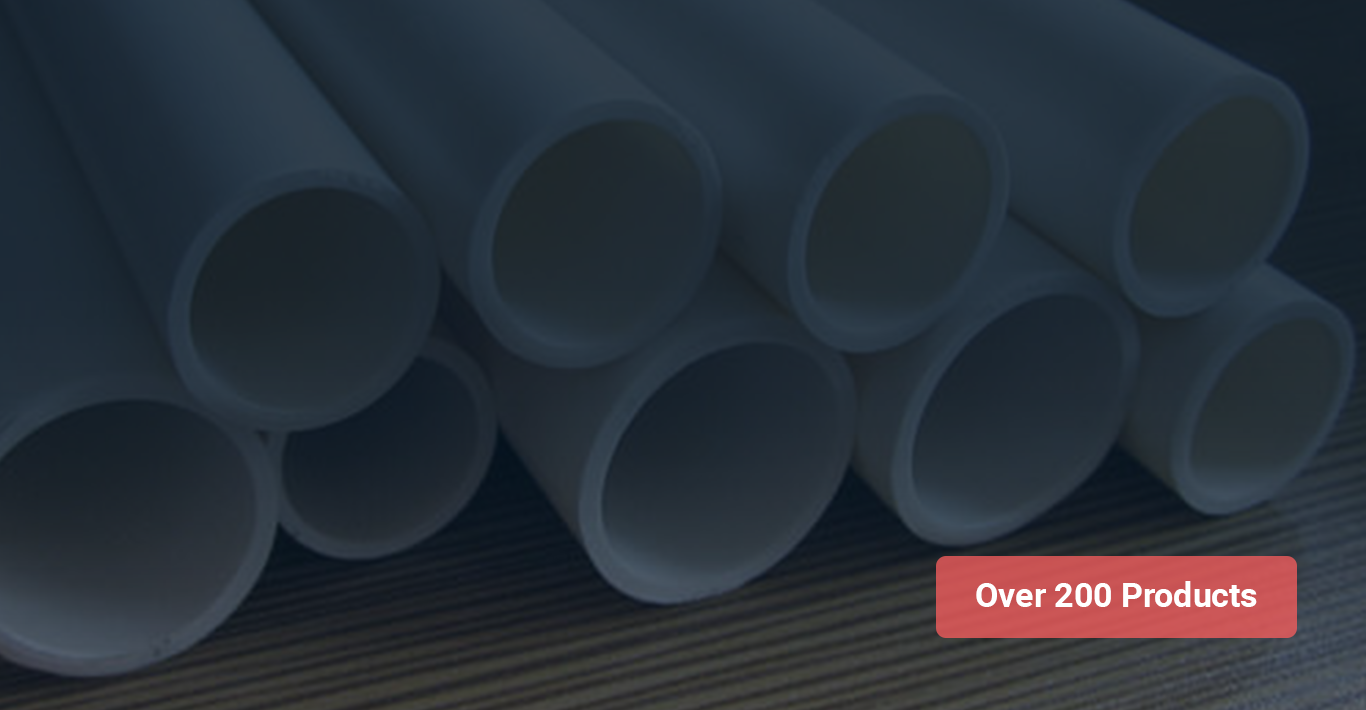
<style>
.page{position:relative;width:1366px;height:710px}
.page>*{position:absolute;margin:0}
.t1{font:33.7px "Roboto-Bold";color:#ffffff}
</style>
<div class="page">
<p class="t1" style="left:976px;top:581px;width:281px;height:26px">Over 200 Products</p>
</div>
